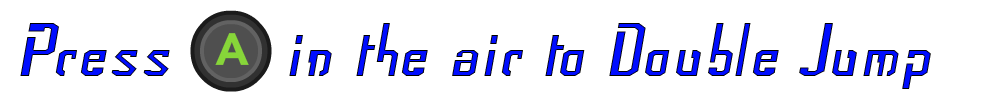
<style>
.page{position:relative;width:1000px;height:100px;background:#ffffff}
.page>*{position:absolute;margin:0}
.t1{font:72px "Frak-Regular";color:#000dff}
</style>
<div class="page">
<p class="t1" style="left:20px;top:23px;width:150px;height:53px">Press</p>
<p class="t1" style="left:289px;top:23px;width:642px;height:66px">in the air to Double Jump</p>
</div>
